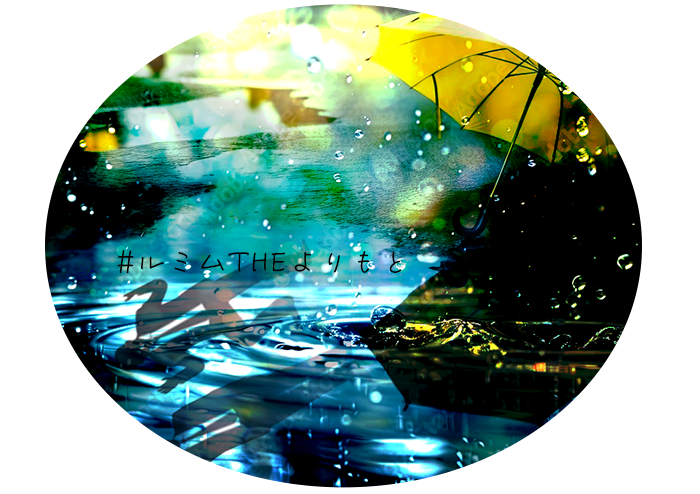
<style>
.page{position:relative;width:700px;height:494px;background:#ffffff}
.page>*{position:absolute;margin:0}
.t1{font:29.3px "VDL-PenLetter-Medium";letter-spacing:0.04em;color:#040000}
</style>
<div class="page">
<p class="t1" style="left:117px;top:250px;width:285px;height:24px">#ルミムTHEよりもと</p>
</div>
